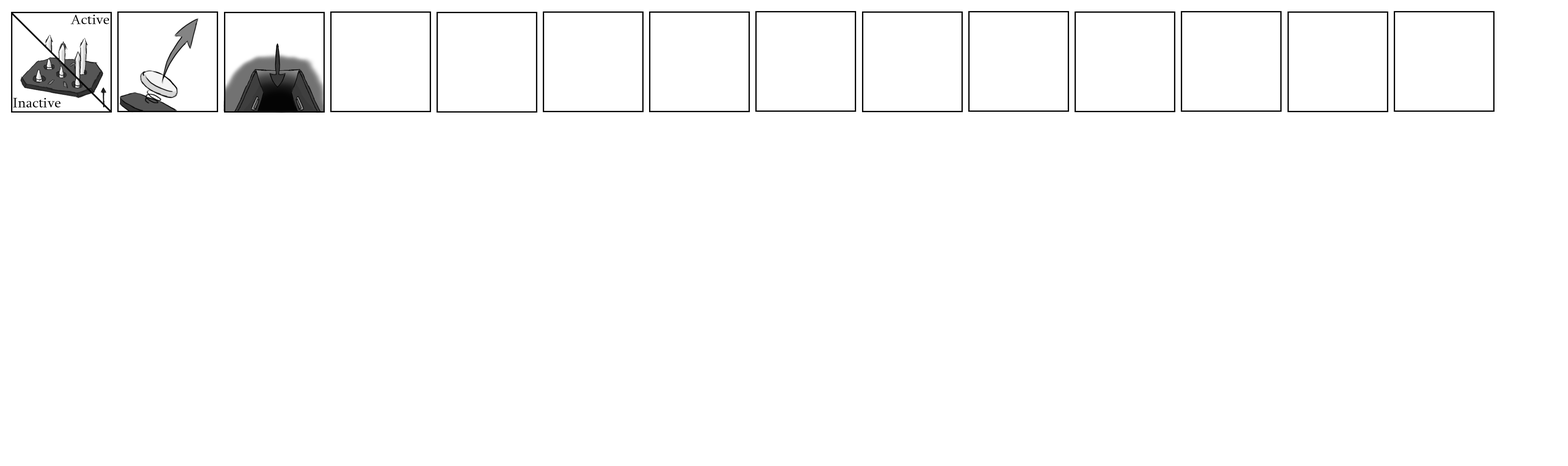
<style>
.page{position:relative;width:1568px;height:466px;background:#ffffff}
.page>*{position:absolute;margin:0}
.t1{font:14.2px "Sylfaen";color:#000000}
</style>
<div class="page">
<p class="t1" style="left:71px;top:15px;width:38px;height:9px">Active</p>
<p class="t1" style="left:13px;top:98px;width:47px;height:9px">Inactive</p>
</div>
